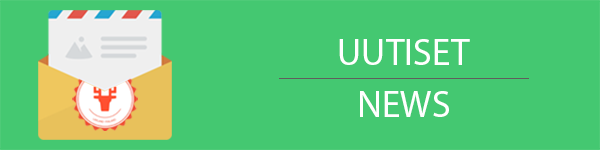
<style>
.page{position:relative;width:600px;height:150px;background:#44c871}
.page>*{position:absolute;margin:0}
.t1{font:37.5px "MyriadPro-Regular";color:#ffffff;text-transform:uppercase}
</style>
<div class="page">
<p class="t1" style="left:339px;top:39px;width:131px;height:26px">UUTISET</p>
<p class="t1" style="left:360px;top:91px;width:89px;height:26px">NEWS</p>
</div>
